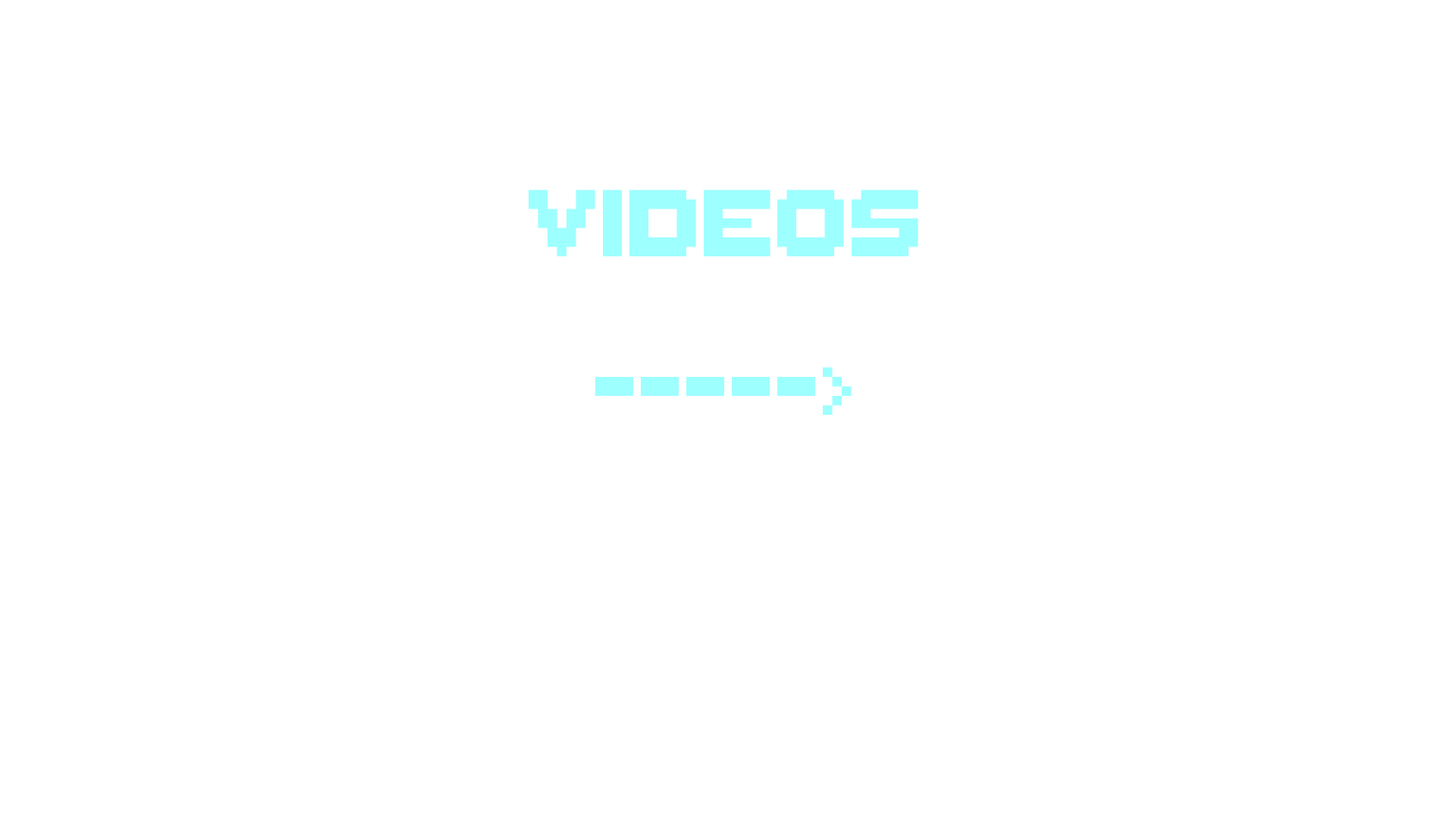
<style>
.page{position:relative;width:1456px;height:819px;background:#ffffff}
.page>*{position:absolute;margin:0}
.t1{font:151.7px/158.5px "ThaleahFat";letter-spacing:-0.012em;color:#9effff}
</style>
<div class="page">
<p class="t1" style="left:529px;top:190px;width:389px;height:225px;text-align:center">videos<br>-----&gt;</p>
</div>
